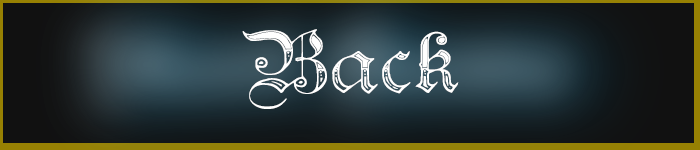
<style>
.page{position:relative;width:700px;height:150px}
.page>*{position:absolute;margin:0}
.t1{font:72px "TeutonicNo4-DemiBold";color:#ffffff}
</style>
<div class="page">
<p class="t1" style="left:242px;top:29px;width:217px;height:80px">Back</p>
</div>
